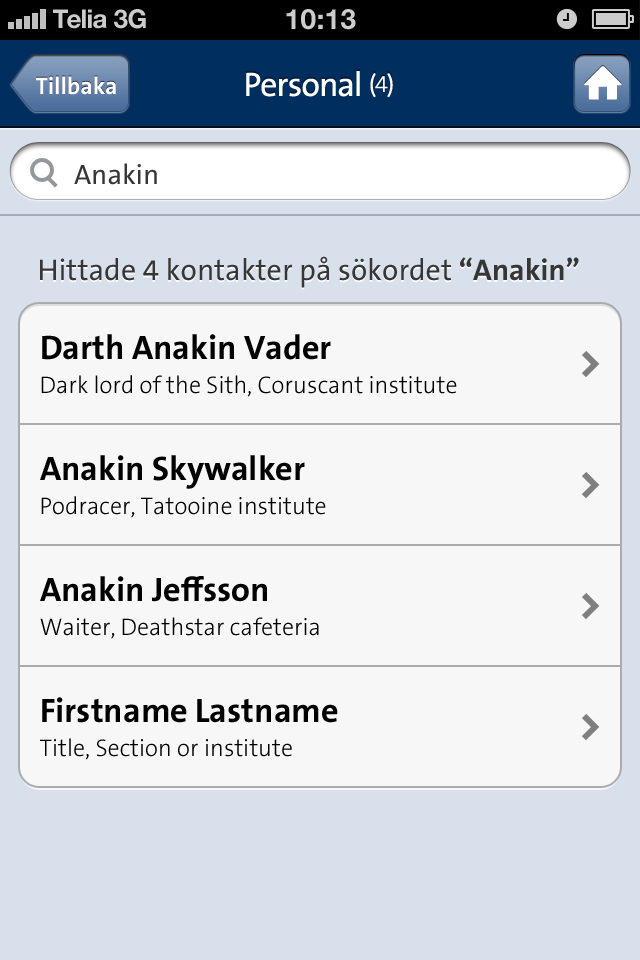
<style>
.page{position:relative;width:640px;height:960px;background:#f7f7f7}
.page>*{position:absolute;margin:0}
.t1{font:26px "HelveticaNeue-Bold";color:#cccccc}
.t2{font:26px "HelveticaNeue-Bold";color:#cccccc;text-transform:uppercase}
.t3{font:28px "HelveticaNeue-Bold";color:#cccccc;text-transform:uppercase}
.t4{font:24px "TheSansB-W7Bold";color:#ffffff}
.t5{font:34px "TheSansB-W5Plain";letter-spacing:-0.015em;color:#ffffff}
.t6{font:24px "TheSansB-W5Plain";letter-spacing:-0.015em;color:#ffffff}
.t7{font:24px "TheSansB-W3Light";letter-spacing:-0.015em;color:#ffffff}
.t8{font:28px "TheSansB-W5Plain";color:#363636}
.t9{font:30px "TheSansB-W5Plain";color:#363636}
.t10{font:30px "TheSansB-W7Bold";color:#363636}
.t11{font:24px/34px "TheSansB-W3Light";color:#000000}
.t12{font:34px/87px "TheSansB-W7Bold";color:#000000}
</style>
<div class="page">
<p class="t1" style="left:53px;top:9px;width:54px;height:20px">Telia</p>
<p class="t2" style="left:114px;top:9px;width:32px;height:20px">3G</p>
<p class="t3" style="left:286px;top:9px;width:70px;height:21px">10:13</p>
<p class="t4" style="left:36px;top:76px;width:80px;height:19px">Tillbaka</p>
<p class="t5" style="left:246px;top:71px;width:147px;height:27px">Personal <span class="t6">(</span><span class="t7">4</span><span class="t6">)</span></p>
<p class="t8" style="left:74px;top:163px;width:83px;height:22px">Anakin</p>
<p class="t9" style="left:40px;top:256px;width:539px;height:32px">Hittade 4 kontakter på sökordet <span class="t10">“Anakin”</span></p>
<p class="t11" style="left:41px;top:334px;width:416px;height:63px"><span class="t12">Darth Anakin Vader<br></span>Dark lord of the Sith, Coruscant institute</p>
<p class="t11" style="left:40px;top:455px;width:286px;height:63px"><span class="t12">Anakin Skywalker<br></span>Podracer, Tatooine institute</p>
<p class="t11" style="left:40px;top:576px;width:279px;height:63px"><span class="t12">Anakin Jeffsson<br></span>Waiter, Deathstar cafeteria</p>
<p class="t11" style="left:40px;top:697px;width:298px;height:63px"><span class="t12">Firstname Lastname<br></span>Title, Section or institute</p>
</div>
